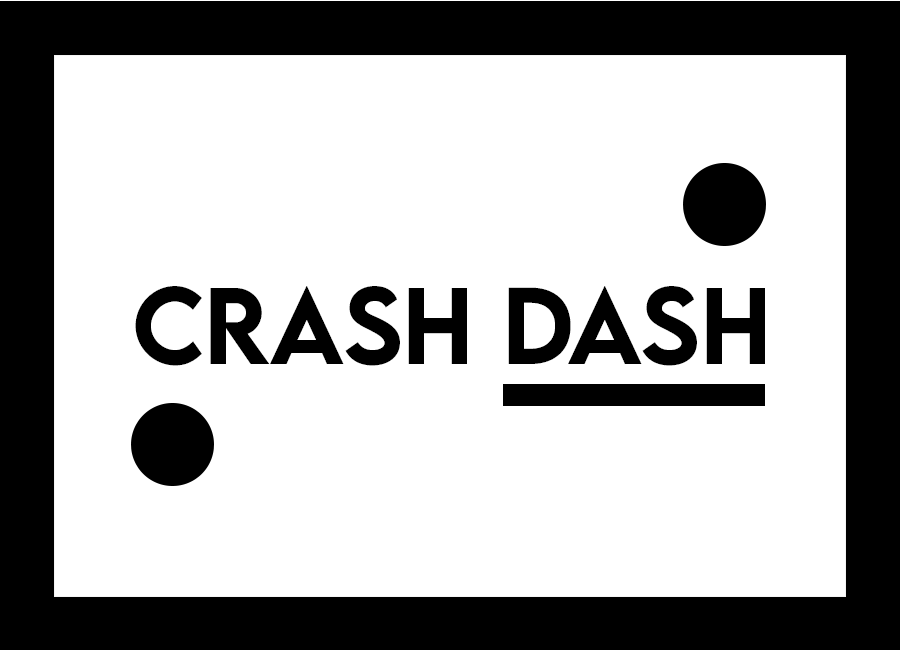
<style>
.page{position:relative;width:900px;height:650px;background:#ffffff}
.page>*{position:absolute;margin:0}
.t1{font:97px "LEMONMILK-Medium";color:#000000}
</style>
<div class="page">
<p class="t1" style="left:135px;top:286px;width:630px;height:80px">Crash Dash</p>
</div>
